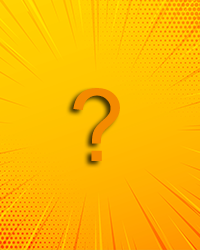
<style>
.page{position:relative;width:200px;height:250px}
.page>*{position:absolute;margin:0}
.t1{font:100px "ArialMT";color:#f48a00}
</style>
<div class="page">
<p class="t1" style="left:73px;top:88px;width:47px;height:73px">?</p>
</div>
